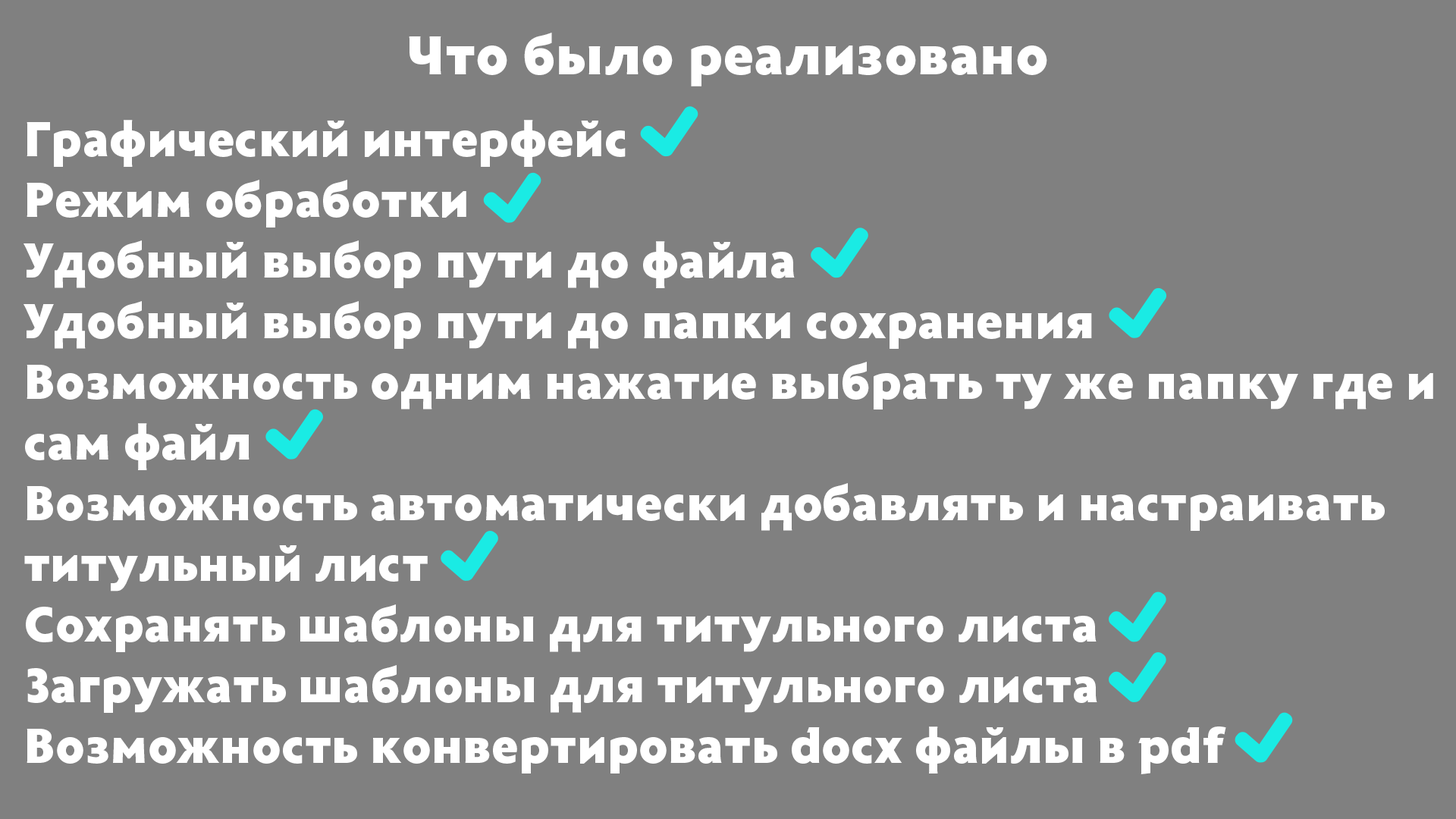
<style>
.page{position:relative;width:1456px;height:819px;background:#808080}
.page>*{position:absolute;margin:0}
.t1{font:56.9px "Radiance-Black";color:#ffffff}
.t2{font:50.6px "Radiance-Black";color:#ffffff}
</style>
<div class="page">
<p class="t1" style="left:409px;top:33px;width:638px;height:53px">Что было реализовано</p>
<p class="t2" style="left:24px;top:120px;width:1409px;height:654px">Графический интерфейс<br>Режим обработки<br>Удобный выбор пути до файла<br>Удобный выбор пути до папки сохранения<br>Возможность одним нажатие выбрать ту же папку где и<br>сам файл<br>Возможность автоматически добавлять и настраивать<br>титульный лист<br>Сохранять шаблоны для титульного листа<br>Загружать шаблоны для титульного листа<br>Возможность конвертировать docx файлы в pdf</p>
</div>
